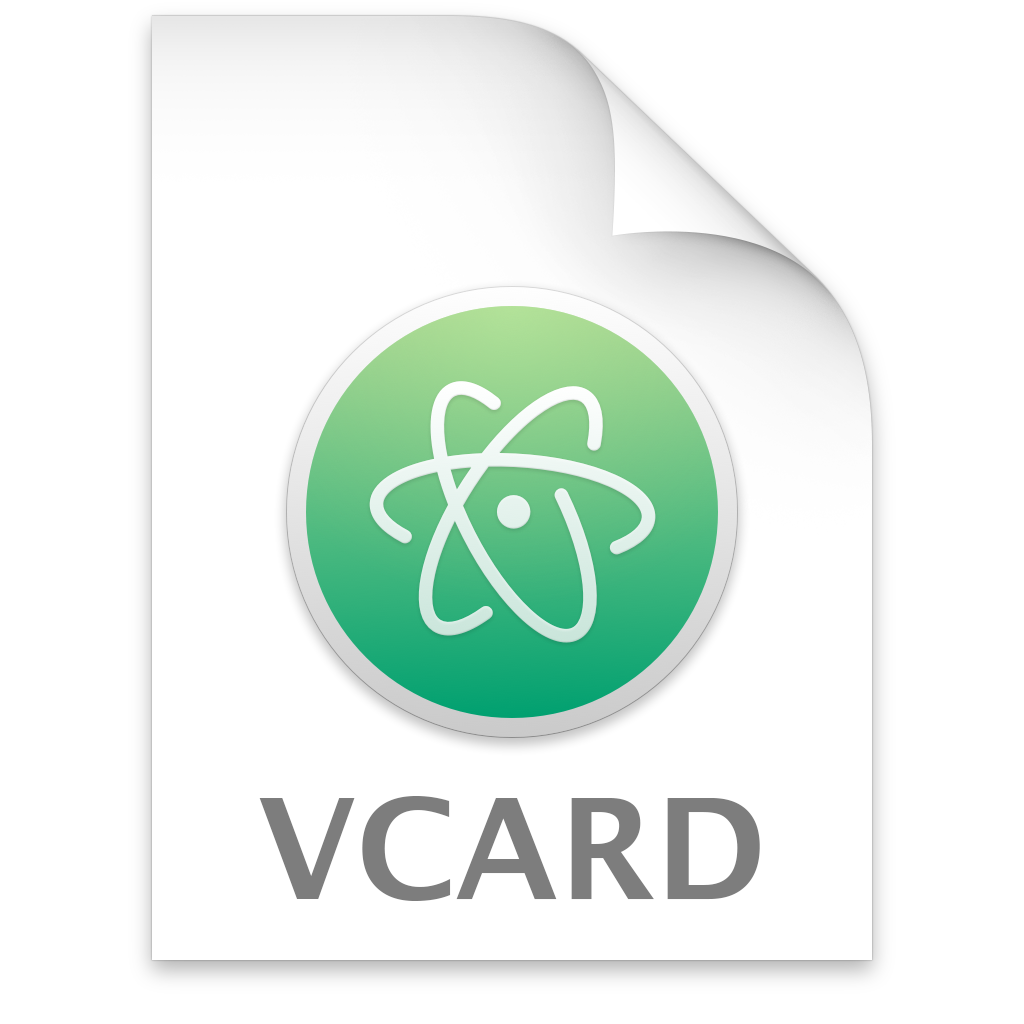
<style>
.page{position:relative;width:1024px;height:1024px;background:#ffffff}
.page>*{position:absolute;margin:0}
.t1{font:140px "LucidaGrande-Bold";color:#7d7d7d}
</style>
<div class="page">
<p class="t1" style="left:259px;top:796px;width:501px;height:105px">VCARD</p>
</div>
